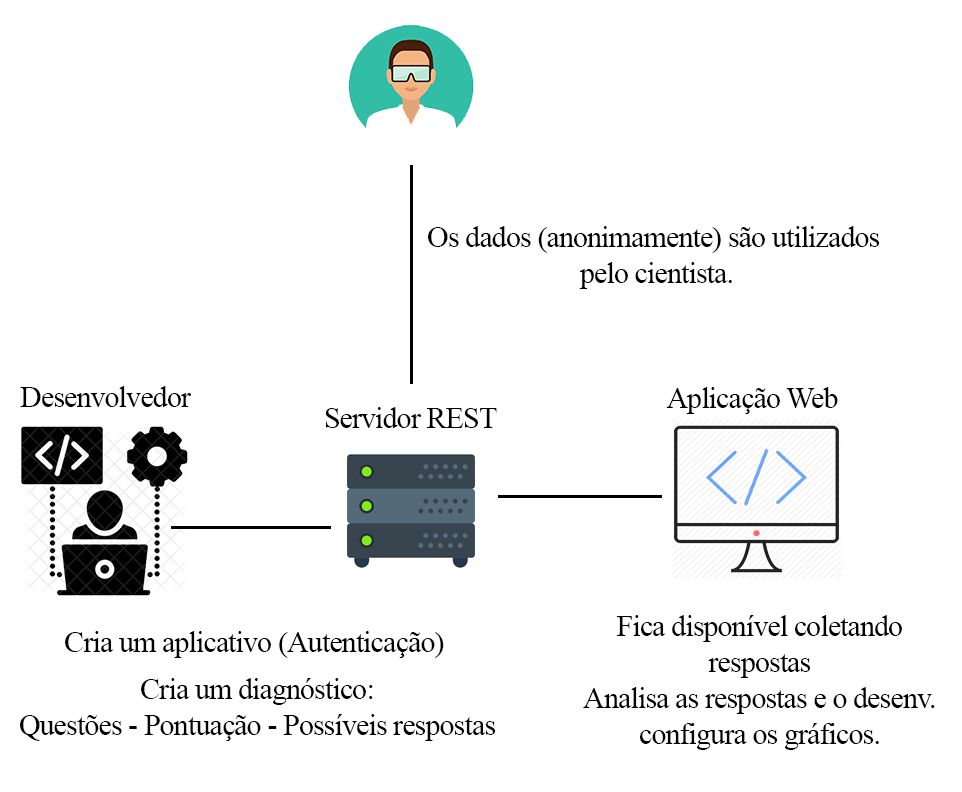
<style>
.page{position:relative;width:962px;height:792px;background:#ffffff}
.page>*{position:absolute;margin:0}
.t1{font:30px "TimesNewRomanPSMT";letter-spacing:-0.03em;color:#000000}
</style>
<div class="page">
<p class="t1" style="left:428px;top:226px;width:452px;height:63px;text-align:center">Os dados (anonimamente) são utilizados <br>pelo cientista.</p>
<p class="t1" style="left:20px;top:386px;width:171px;height:21px">Desenvolvedor</p>
<p class="t1" style="left:666px;top:387px;width:172px;height:27px">Aplicação Web</p>
<p class="t1" style="left:325px;top:407px;width:172px;height:21px">Servidor REST</p>
<p class="t1" style="left:583px;top:615px;width:352px;height:135px;text-align:center">Fica disponível coletando<br>respostas<br>Analisa as respostas e o desenv.<br>configura os gráficos.</p>
<p class="t1" style="left:65px;top:631px;width:379px;height:27px">Cria um aplicativo (Autenticação)</p>
<p class="t1" style="left:20px;top:678px;width:476px;height:63px;text-align:center">Cria um diagnóstico:<br>Questões - Pontuação - Possíveis respostas</p>
</div>
